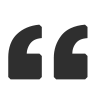
<style>
.page{position:relative;width:100px;height:100px;background:#ffffff}
.page>*{position:absolute;margin:0}
.t1{font:192.8px "Helvetica";color:#2f2f2f;font-weight:bold;scale:1.44 1}
</style>
<div class="page">
<p class="t1" style="left:8px;top:24px;width:80px;height:56px">“</p>
</div>
